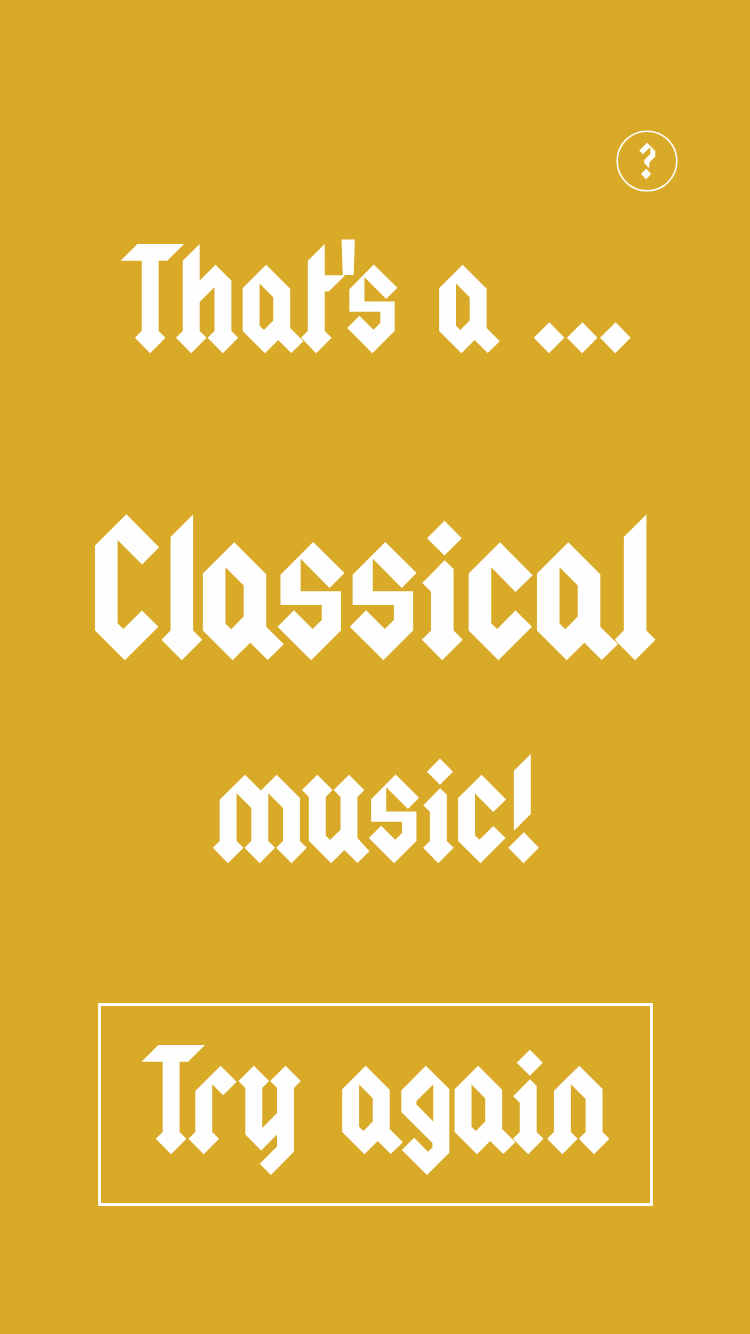
<style>
.page{position:relative;width:750px;height:1334px;background:#d8aa28}
.page>*{position:absolute;margin:0}
.t1{font:40px "Squealer";color:#fffefe}
.t2{font:120px "Squealer";color:#fffefe}
.t3{font:160px "Squealer";color:#fffefe}
</style>
<div class="page">
<p class="t1" style="left:639px;top:142px;width:17px;height:38px">?</p>
<p class="t2" style="left:120px;top:239px;width:511px;height:115px">That's a ...</p>
<p class="t3" style="left:95px;top:514px;width:561px;height:147px">Classical</p>
<p class="t2" style="left:212px;top:753px;width:327px;height:111px">music!</p>
<p class="t2" style="left:141px;top:1044px;width:469px;height:132px">Try again</p>
</div>
